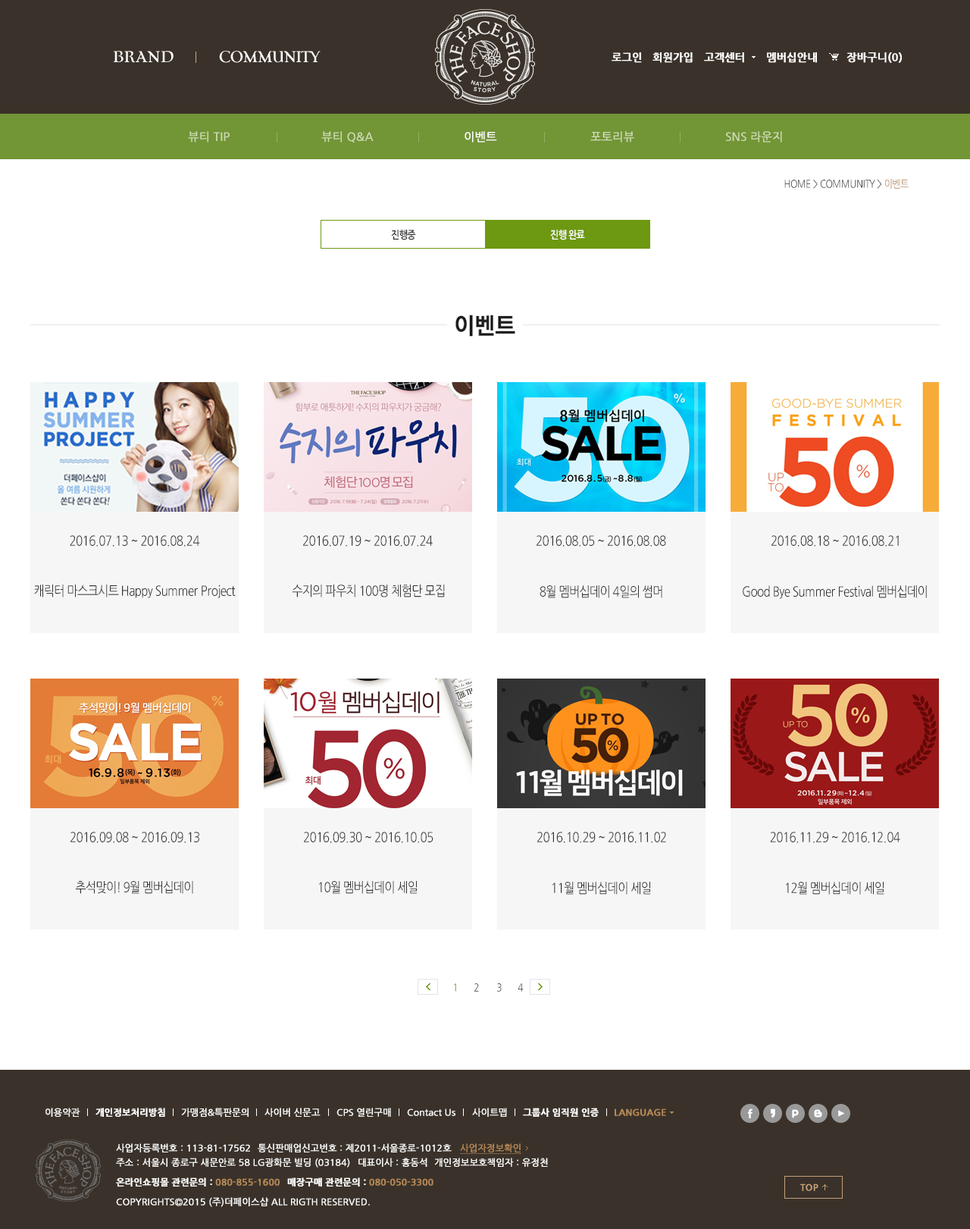
<style>
.page{position:relative;width:970px;height:1229px;background:#ffffff}
.page>*{position:absolute;margin:0}
.t1{font:10.6px "NanumGothicBold";color:#ffffff;font-weight:bold}
.t2{font:11.4px "NanumGothic";color:#cddbb1;font-weight:bold}
.t3{font:11.4px "NanumGothic";color:#ffffff;font-weight:bold}
.t4{font:10.6px "NanumGothic";letter-spacing:-0.03em;color:#333333;scale:0.85 1}
.t5{font:10.6px "NanumGothic";letter-spacing:-0.03em;color:#b68957;scale:0.85 1}
.t6{font:10.6px "NanumGothicBold";letter-spacing:-0.03em;color:#333333;scale:0.85 1}
.t7{font:10.6px "NanumGothicBold";letter-spacing:-0.03em;color:#ffffff;scale:0.85 1}
.t8{font:13.6px "NanumGothic";letter-spacing:-0.03em;color:#333333;scale:0.85 1}
.t9{font:10.6px "NanumGothic";letter-spacing:-0.03em;scale:0.85 1}
.t10{font:9.1px "NanumGothic";color:#ffffff;font-weight:bold}
.t11{font:9.1px "NanumGothicBold";color:#ffffff;font-weight:bold}
.t12{font:9.1px "NanumGothicBold";color:#b68957;font-weight:bold}
.t13{font:9.1px "NanumGothic";color:#b68957;font-weight:bold;text-decoration:underline}
</style>
<div class="page">
<p class="t1" style="left:612px;top:52px;width:30px;height:11px">로그인</p>
<p class="t1" style="left:653px;top:52px;width:40px;height:11px">회원가입</p>
<p class="t1" style="left:704px;top:52px;width:40px;height:11px">고객센터</p>
<p class="t1" style="left:767px;top:52px;width:50px;height:11px">멤버십안내</p>
<p class="t1" style="left:847px;top:52px;width:55px;height:11px">장바구니(0)</p>
<p class="t2" style="left:188px;top:131px;width:42px;height:12px">뷰티 TIP</p>
<p class="t2" style="left:321px;top:131px;width:53px;height:12px">뷰티 Q&amp;A</p>
<p class="t3" style="left:465px;top:131px;width:32px;height:12px">이벤트</p>
<p class="t2" style="left:591px;top:131px;width:44px;height:12px">포토리뷰</p>
<p class="t2" style="left:726px;top:131px;width:56px;height:12px">SNS 라운지</p>
<p class="t4" style="left:785px;top:179px;width:124px;height:10px">HOME &gt; COMMUNITY &gt;<span class="t5"> 이벤트</span></p>
<p class="t6" style="left:391px;top:230px;width:25px;height:10px">진행중</p>
<p class="t7" style="left:550px;top:230px;width:35px;height:10px">진행 완료</p>
<p class="t8" style="left:70px;top:535px;width:130px;height:12px">2016.07.13 ~ 2016.08.24</p>
<p class="t8" style="left:303px;top:535px;width:130px;height:12px">2016.07.19 ~ 2016.07.24</p>
<p class="t8" style="left:537px;top:535px;width:129px;height:12px">2016.08.05 ~ 2016.08.08</p>
<p class="t8" style="left:772px;top:535px;width:127px;height:12px">2016.08.18 ~ 2016.08.21</p>
<p class="t8" style="left:34px;top:584px;width:202px;height:14px">캐릭터 마스크시트 Happy Summer Project</p>
<p class="t8" style="left:292px;top:584px;width:153px;height:13px">수지의 파우치 100명 체험단 모집</p>
<p class="t8" style="left:540px;top:585px;width:123px;height:13px">8월 멤버십데이 4일의 썸머</p>
<p class="t8" style="left:743px;top:585px;width:184px;height:14px">Good Bye Summer Festival 멤버십데이</p>
<p class="t8" style="left:71px;top:832px;width:128px;height:11px">2016.09.08 ~ 2016.09.13</p>
<p class="t8" style="left:304px;top:832px;width:130px;height:11px">2016.09.30 ~ 2016.10.05</p>
<p class="t8" style="left:537px;top:832px;width:129px;height:11px">2016.10.29 ~ 2016.11.02</p>
<p class="t8" style="left:770px;top:832px;width:131px;height:11px">2016.11.29 ~ 2016.12.04</p>
<p class="t8" style="left:75px;top:881px;width:118px;height:13px">추석맞이! 9월 멤버십데이</p>
<p class="t8" style="left:319px;top:881px;width:99px;height:13px">10월 멤버십데이 세일</p>
<p class="t8" style="left:553px;top:882px;width:98px;height:13px">11월 멤버십데이 세일</p>
<p class="t8" style="left:786px;top:882px;width:99px;height:13px">12월 멤버십데이 세일</p>
<p class="t9" style="left:454px;top:983px;width:2px;height:9px">1</p>
<p class="t9" style="left:475px;top:983px;width:4px;height:9px">2</p>
<p class="t4" style="left:497px;top:983px;width:5px;height:9px">3</p>
<p class="t9" style="left:518px;top:983px;width:6px;height:9px">4</p>
<p class="t10" style="left:45px;top:1108px;width:35px;height:9px">이용약관</p>
<p class="t11" style="left:96px;top:1108px;width:69px;height:9px">개인정보처리방침</p>
<p class="t10" style="left:181px;top:1108px;width:68px;height:9px">가맹점&amp;특판문의</p>
<p class="t10" style="left:265px;top:1108px;width:56px;height:9px">사이버 신문고</p>
<p class="t10" style="left:337px;top:1108px;width:54px;height:9px">CPS 열린구매</p>
<p class="t10" style="left:407px;top:1108px;width:49px;height:8px">Contact Us</p>
<p class="t10" style="left:472px;top:1108px;width:35px;height:9px">사이트맵</p>
<p class="t11" style="left:523px;top:1108px;width:76px;height:9px">그룹사 임직원 인증</p>
<p class="t12" style="left:615px;top:1108px;width:51px;height:8px">LANGUAGE</p>
<p class="t10" style="left:116px;top:1143px;width:134px;height:9px">사업자등록번호 : 113-81-17562</p>
<p class="t10" style="left:258px;top:1143px;width:194px;height:9px">통신판매업신고번호 : 제2011-서울종로-1012호</p>
<p class="t13" style="left:460px;top:1143px;width:62px;height:11px">사업자정보확인</p>
<p class="t10" style="left:116px;top:1158px;width:234px;height:9px">주소 : 서울시 종로구 새문안로 58 LG광화문 빌딩 (03184)</p>
<p class="t10" style="left:359px;top:1158px;width:69px;height:9px">대표이사 : 홍동석</p>
<p class="t10" style="left:434px;top:1158px;width:114px;height:9px">개인정보보호책임자 : 유정천</p>
<p class="t11" style="left:116px;top:1177px;width:164px;height:9px">온라인쇼핑몰 관련문의 : <span class="t12">080-855-1600</span></p>
<p class="t12" style="left:287px;top:1177px;width:147px;height:9px"><span class="t11">매장구매 관련문의 : </span>080-050-3300</p>
<p class="t10" style="left:116px;top:1197px;width:254px;height:10px">COPYRIGHTS©2015 (주)더페이스샵 ALL RIGTH RESERVED.</p>
</div>
